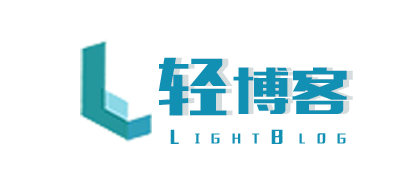
<style>
.page{position:relative;width:416px;height:180px;background:#ffffff}
.page>*{position:absolute;margin:0}
.t1{font:49.1px "MFLiHei_Noncommercial-Regular";letter-spacing:0.04em;color:#1190b4;font-variant:small-caps;scale:1.17 1}
.t2{font:61px "MFLiHei_Noncommercial-Regular";letter-spacing:0.04em;color:#1190b4;font-variant:small-caps;scale:1.17 1}
.t3{font:15.4px "MFLiHei_Noncommercial-Regular";letter-spacing:1.24em;color:#1190b4;font-variant:small-caps;font-weight:bold;scale:0.85 1}
</style>
<div class="page">
<p class="t1" style="left:158px;top:57px;width:189px;height:59px"><span class="t2">轻</span>博客</p>
<p class="t1" style="left:164px;top:57px;width:189px;height:59px"><span class="t2">轻</span>博客</p>
<p class="t3" style="left:170px;top:129px;width:176px;height:15px">LightBlog</p>
</div>
